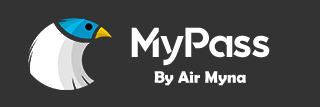
<style>
.page{position:relative;width:320px;height:107px;background:#333333}
.page>*{position:absolute;margin:0}
.t1{font:41.7px "Quantify";color:#ffffff}
.t2{font:41.7px "Quantify";color:#ffffff;text-transform:uppercase}
.t3{font:16.7px "BerlinSansFBDemi-Bold";color:#ffffff}
</style>
<div class="page">
<p class="t1" style="left:131px;top:27px;width:139px;height:39px"><span class="t2">M</span>yPass</p>
<p class="t3" style="left:154px;top:71px;width:92px;height:15px">By Air Myna</p>
</div>
